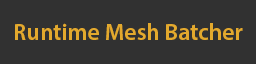
<style>
.page{position:relative;width:256px;height:64px;background:#313131}
.page>*{position:absolute;margin:0}
.t1{font:23.6px "MyriadPro-Semibold";color:#e3a92d}
</style>
<div class="page">
<p class="t1" style="left:15px;top:23px;width:228px;height:17px">Runtime Mesh Batcher</p>
</div>
